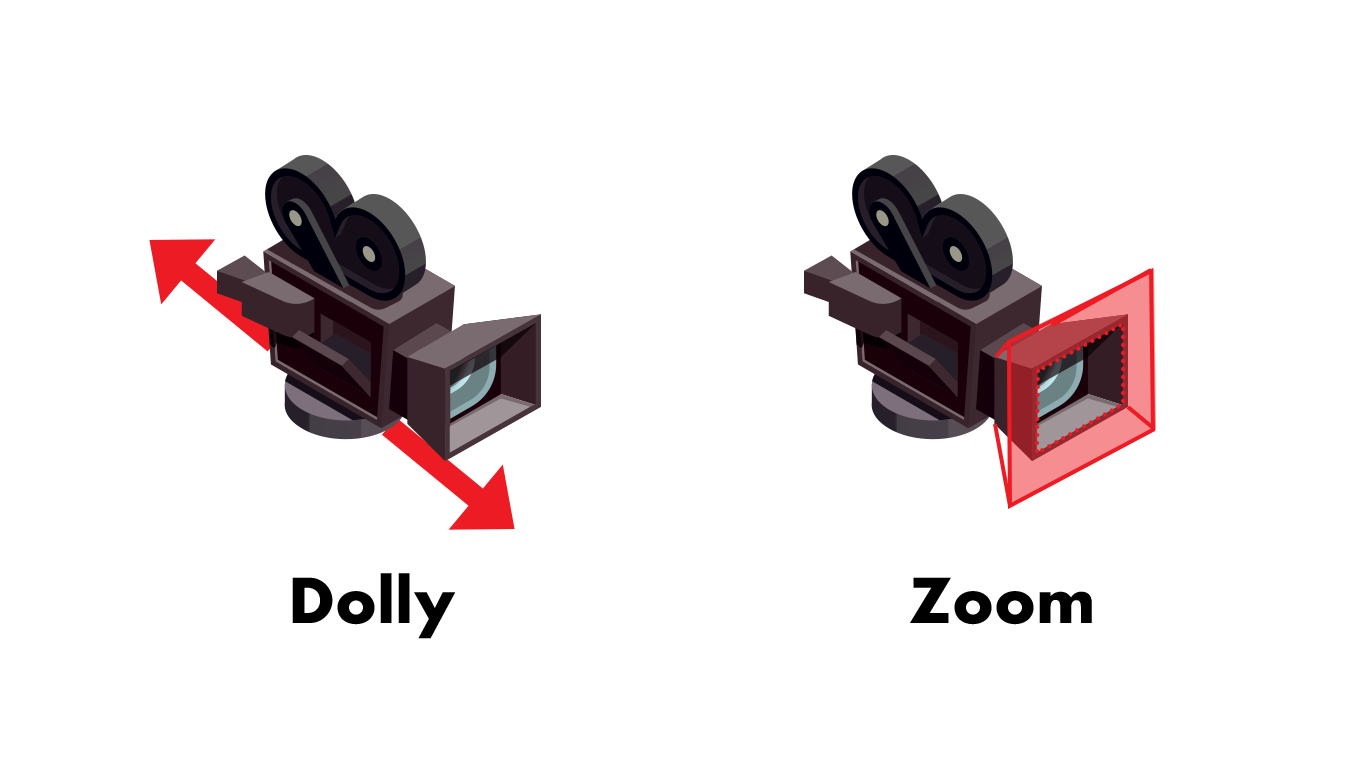
<style>
.page{position:relative;width:1366px;height:768px;background:#ffffff}
.page>*{position:absolute;margin:0}
.t1{font:60px "Futura-Bold";color:#000000}
</style>
<div class="page">
<p class="t1" style="left:292px;top:573px;width:164px;height:66px">Dolly</p>
<p class="t1" style="left:910px;top:577px;width:182px;height:48px">Zoom</p>
</div>
